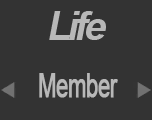
<style>
.page{position:relative;width:152px;height:120px;background:#333333}
.page>*{position:absolute;margin:0}
.t1{font:40px "Arial-BoldMT";letter-spacing:-0.1em;color:#b8b8b8;font-style:italic}
.t2{font:33px "ArialMT";letter-spacing:-0.05em;color:#b8b8b8;font-weight:bold;scale:0.68 1}
</style>
<div class="page">
<p class="t1" style="left:49px;top:11px;width:57px;height:29px">Life</p>
<p class="t2" style="left:39px;top:73px;width:79px;height:25px">Member</p>
</div>
